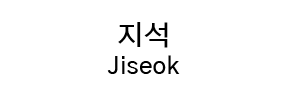
<style>
.page{position:relative;width:288px;height:100px;background:#ffffff}
.page>*{position:absolute;margin:0}
.t1{font:24.3px "GothicA1-Medium";color:#000000}
.t2{font:27.8px "GothicA1-Medium";color:#000000}
</style>
<div class="page">
<p class="t1" style="left:107px;top:22px;width:73px;height:52px;text-align:center"><span class="t2">지석<br></span>Jiseok</p>
</div>
